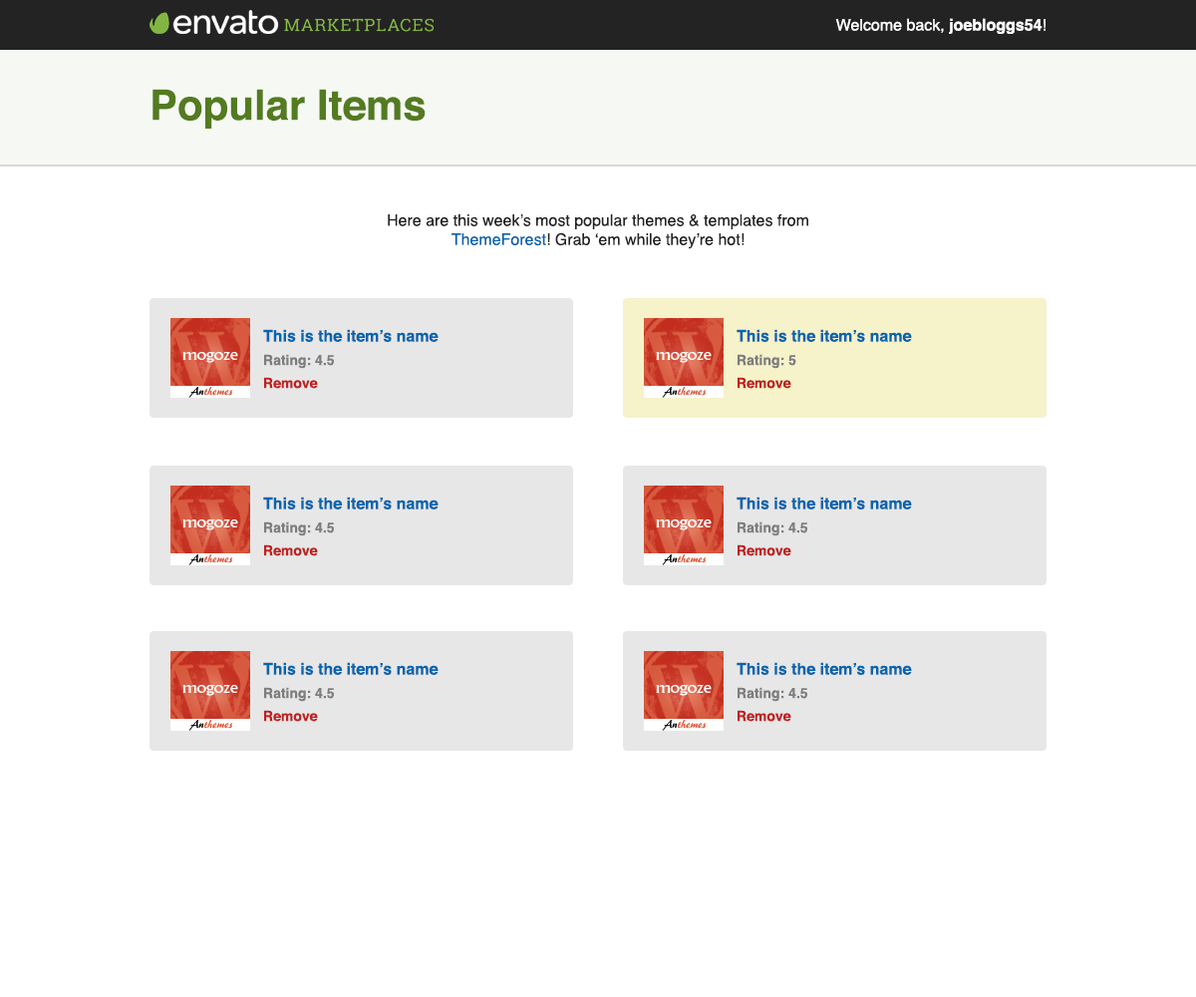
<style>
.page{position:relative;width:1196px;height:997px;background:#ffffff}
.page>*{position:absolute;margin:0}
.t1{font:15.9px "Helvetica";color:#ffffff}
.t2{font:15.9px "Helvetica-Bold";color:#ffffff}
.t3{font:41.9px "Helvetica-Bold";color:#537b20}
.t4{font:15.9px "Helvetica";color:#232323}
.t5{font:15.9px "Helvetica";color:#0565ae}
.t6{font:15.9px "Helvetica-Bold";color:#0565ae}
.t7{font:14px "Helvetica-Bold";color:#7d7d7d}
.t8{font:14px "Helvetica-Bold";color:#be2121}
</style>
<div class="page">
<p class="t1" style="left:835px;top:18px;width:211px;height:16px">Welcome back, <span class="t2">joebloggs54</span>!</p>
<p class="t3" style="left:153px;top:89px;width:273px;height:40px">Popular Items</p>
<p class="t4" style="left:388px;top:213px;width:420px;height:36px;text-align:center">Here are this week’s most popular themes &amp; templates from <span class="t5">ThemeForest</span>! Grab ‘em while they’re hot!</p>
<p class="t6" style="left:263px;top:329px;width:176px;height:13px">This is the item’s name</p>
<p class="t6" style="left:737px;top:329px;width:175px;height:13px">This is the item’s name</p>
<p class="t7" style="left:264px;top:354px;width:70px;height:15px">Rating: 4.5</p>
<p class="t7" style="left:738px;top:354px;width:58px;height:15px">Rating: 5</p>
<p class="t8" style="left:264px;top:377px;width:54px;height:12px">Remove</p>
<p class="t8" style="left:738px;top:377px;width:53px;height:12px">Remove</p>
<p class="t6" style="left:263px;top:496px;width:176px;height:13px">This is the item’s name</p>
<p class="t6" style="left:737px;top:496px;width:175px;height:13px">This is the item’s name</p>
<p class="t7" style="left:264px;top:521px;width:70px;height:15px">Rating: 4.5</p>
<p class="t7" style="left:738px;top:521px;width:69px;height:15px">Rating: 4.5</p>
<p class="t8" style="left:264px;top:544px;width:54px;height:12px">Remove</p>
<p class="t8" style="left:738px;top:544px;width:53px;height:12px">Remove</p>
<p class="t6" style="left:263px;top:662px;width:176px;height:13px">This is the item’s name</p>
<p class="t6" style="left:737px;top:662px;width:175px;height:13px">This is the item’s name</p>
<p class="t7" style="left:264px;top:687px;width:70px;height:15px">Rating: 4.5</p>
<p class="t7" style="left:738px;top:687px;width:69px;height:15px">Rating: 4.5</p>
<p class="t8" style="left:264px;top:710px;width:54px;height:12px">Remove</p>
<p class="t8" style="left:738px;top:710px;width:53px;height:12px">Remove</p>
</div>
